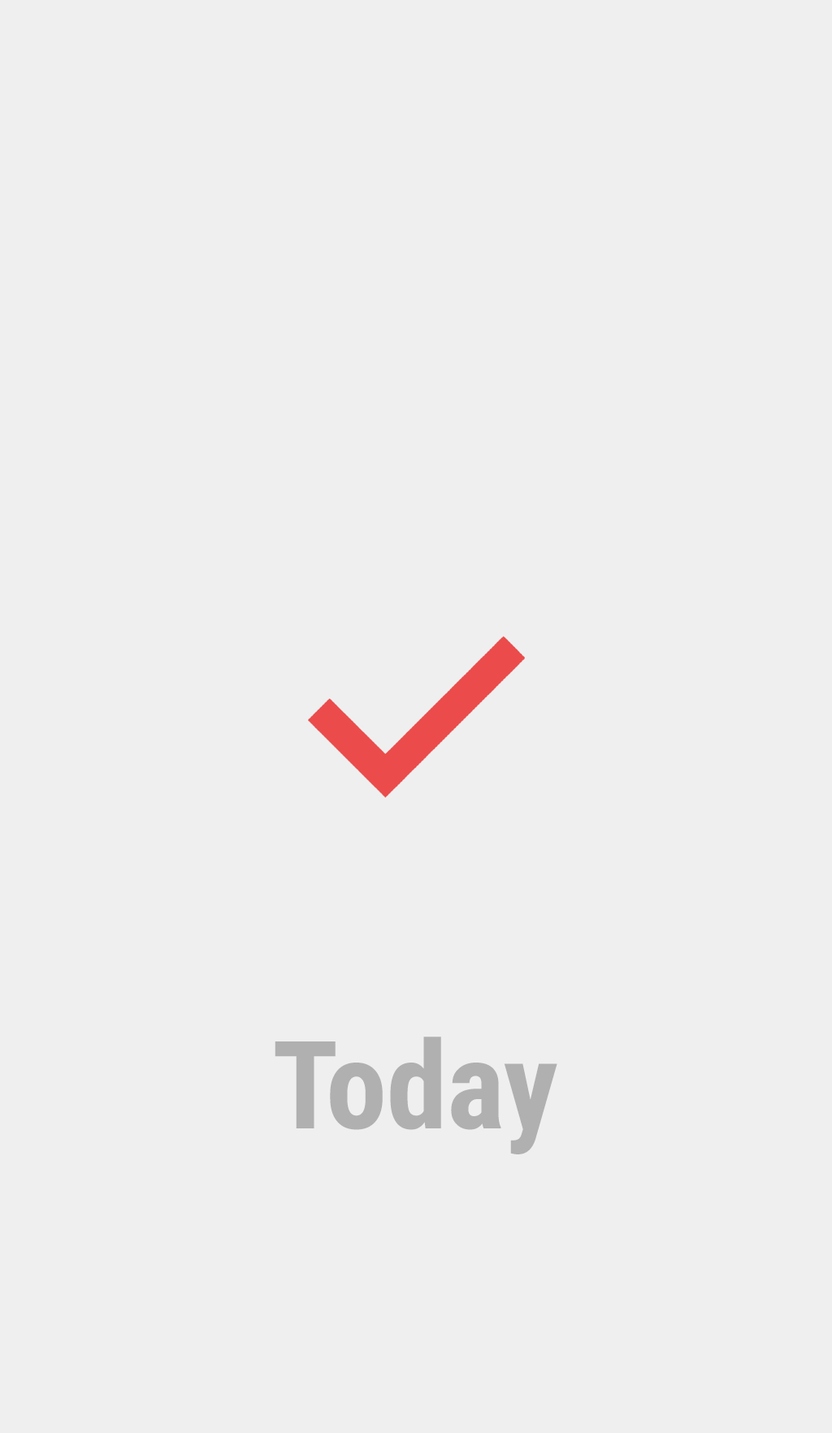
<style>
.page{position:relative;width:832px;height:1433px;background:#efefef}
.page>*{position:absolute;margin:0}
.t1{font:121.9px "RobotoCondensed-Bold";color:#b0b0b0}
</style>
<div class="page">
<p class="t1" style="left:275px;top:1037px;width:282px;height:118px">Today</p>
</div>
